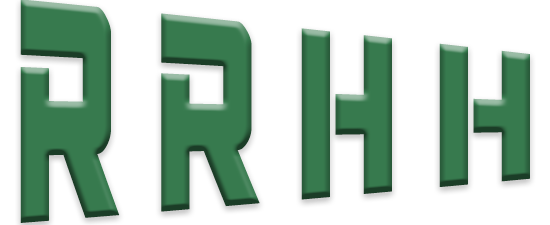
<style>
.page{position:relative;width:550px;height:225px;background:#ffffff}
.page>*{position:absolute;margin:0}
.t1{font:270px "ARDESTINE";letter-spacing:0.2em;color:#377a4e;scale:0.67 1}
</style>
<div class="page">
<p class="t1" style="left:20px;top:0px;width:510px;height:223px">RRHH</p>
</div>
